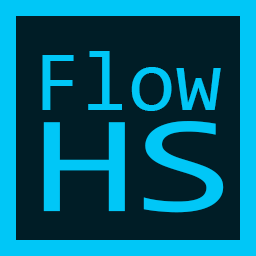
<style>
.page{position:relative;width:256px;height:256px;background:#001d26}
.page>*{position:absolute;margin:0}
.t1{font:85.7px "Consolas";color:#00c7f7}
.t2{font:138.8px "Consolas";color:#00c7f7;scale:1.32 1}
</style>
<div class="page">
<p class="t1" style="left:42px;top:51px;width:179px;height:60px">Flow</p>
<p class="t2" style="left:43px;top:121px;width:181px;height:92px">HS</p>
</div>
